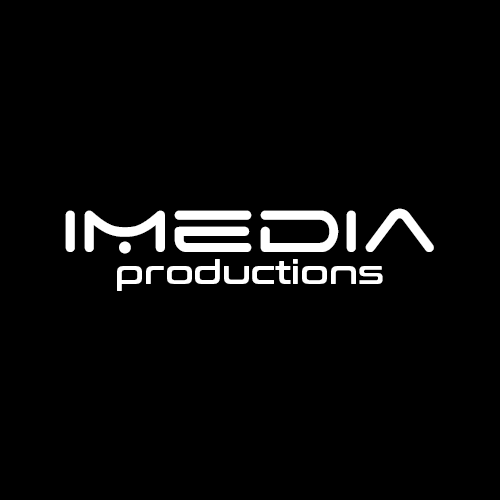
<style>
.page{position:relative;width:500px;height:500px;background:#000000}
.page>*{position:absolute;margin:0}
.t1{font:95px "SpaceAge";color:#ffffff}
.t2{font:33.1px "ConthraxSb-Regular";color:#ffffff}
</style>
<div class="page">
<p class="t1" style="left:65px;top:208px;width:369px;height:46px">iMedia</p>
<p class="t2" style="left:117px;top:259px;width:266px;height:32px">productions</p>
</div>
